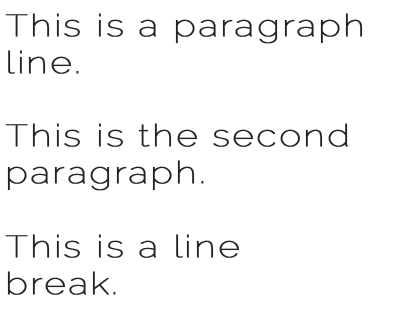
<style>
.page{position:relative;width:400px;height:312px;background:#ffffff}
.page>*{position:absolute;margin:0}
.t1{font:30.7px "Raleway-Thin";letter-spacing:0.05em;color:#222222;font-weight:bold;scale:1.2 1}
</style>
<div class="page">
<p class="t1" style="left:5px;top:13px;width:358px;height:282px">This is a paragraph<br>line.<br><br>This is the second<br>paragraph.<br><br>This is a line<br>break.</p>
</div>
